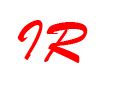
<style>
.page{position:relative;width:114px;height:89px;background:#ffffff}
.page>*{position:absolute;margin:0}
.t1{font:60px "BrushScriptMT";color:#ff0000}
</style>
<div class="page">
<p class="t1" style="left:17px;top:20px;width:71px;height:43px">IR</p>
</div>
